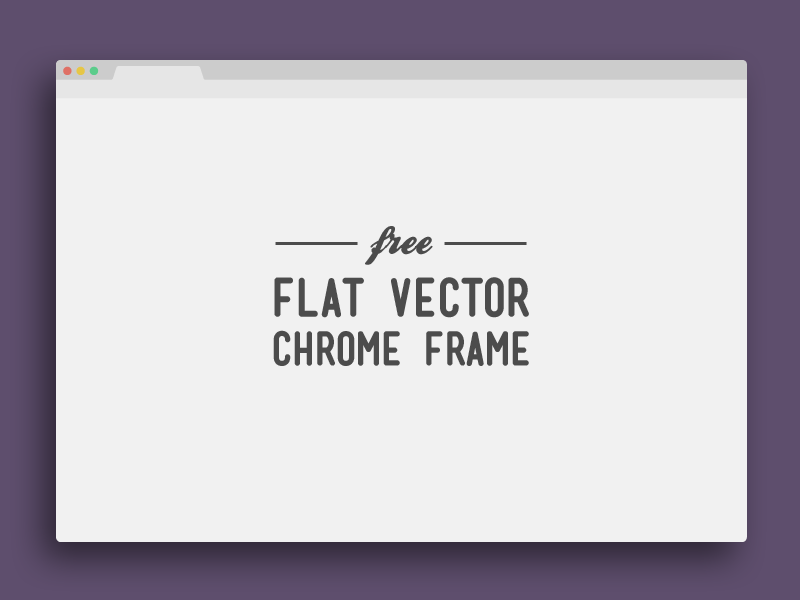
<style>
.page{position:relative;width:800px;height:600px;background:#f1f1f1}
.page>*{position:absolute;margin:0}
.t1{font:41.9px "BallparkWeiner";color:#4b4b4b}
.t2{font:50.1px "MenschBold";color:#4c4c4c}
.t3{font:44px "MenschBold";color:#4c4c4c}
</style>
<div class="page">
<p class="t1" style="left:365px;top:226px;width:68px;height:39px">free</p>
<p class="t2" style="left:274px;top:277px;width:255px;height:41px">FLAT VECTOR</p>
<p class="t3" style="left:273px;top:330px;width:256px;height:36px">CHROME FRAME</p>
</div>
